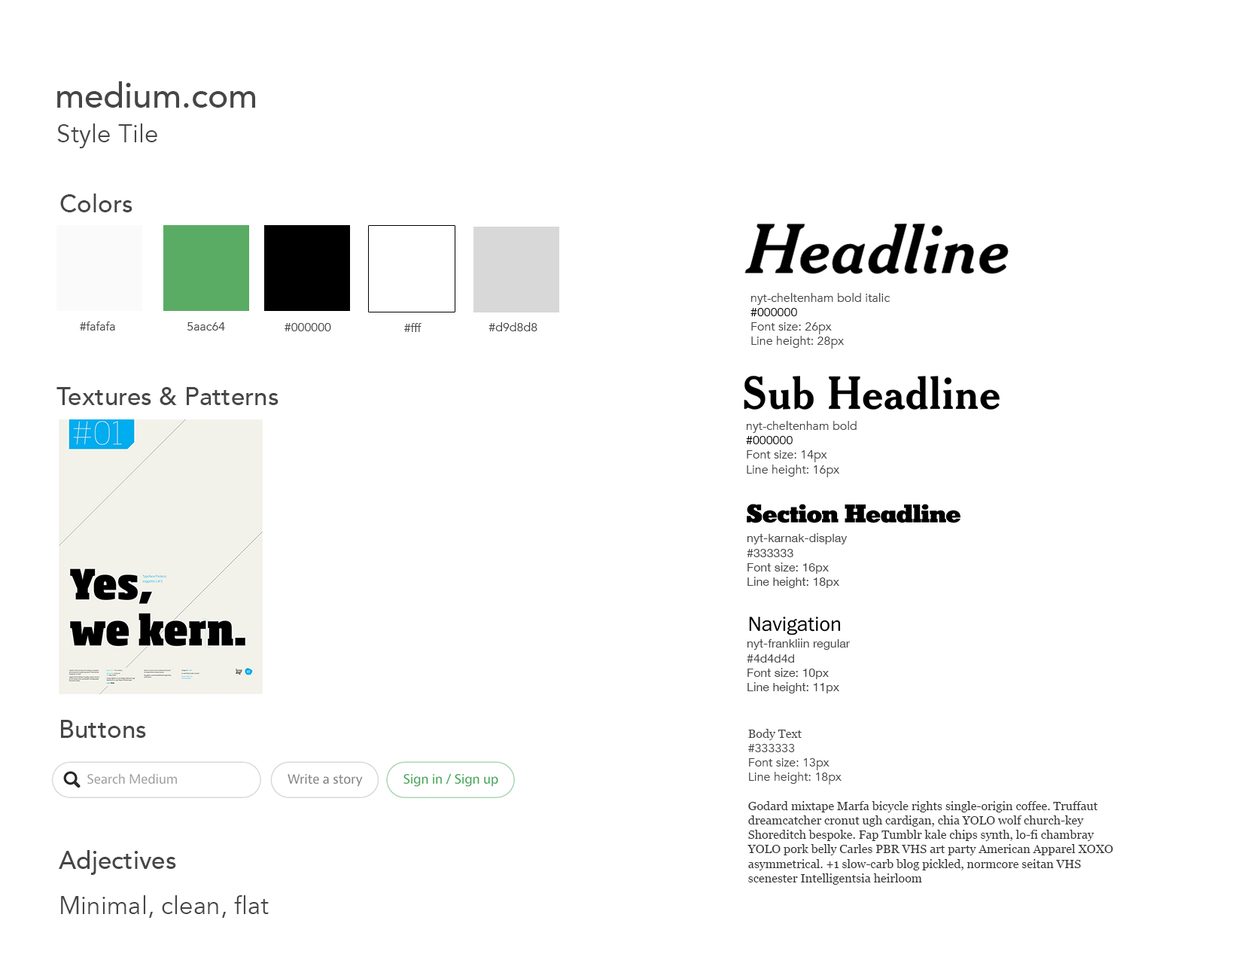
<style>
.page{position:relative;width:1242px;height:960px;background:#ffffff}
.page>*{position:absolute;margin:0}
.t1{font:34.5px "Avenir-Medium";color:#464646}
.t2{font:25.1px "Avenir-Book";color:#464646}
.t3{font:25.1px "Avenir-Medium";color:#464646}
.t4{font:12px "Avenir-Book";color:#464646}
.t5{font:12px "Avenir-Book";color:#000000}
.t6{font:12px "HelveticaNeue";color:#464646}
.t7{font:12px "Georgia";color:#333333}
.t8{font:12px "Georgia";color:#464646}
</style>
<div class="page">
<p class="t1" style="left:57px;top:81px;width:198px;height:27px">medium.com</p>
<p class="t2" style="left:57px;top:123px;width:100px;height:25px">Style Tile</p>
<p class="t3" style="left:60px;top:193px;width:73px;height:19px">Colors</p>
<p class="t4" style="left:751px;top:293px;width:140px;height:56px">nyt-cheltenham bold italic<br><span class="t5">#000000<br></span>Font size: 26px<br>Line height: 28px</p>
<p class="t4" style="left:80px;top:321px;width:35px;height:10px">#fafafa</p>
<p class="t4" style="left:187px;top:322px;width:38px;height:9px">5aac64</p>
<p class="t4" style="left:285px;top:323px;width:46px;height:8px">#000000</p>
<p class="t4" style="left:404px;top:323px;width:18px;height:9px">#fff</p>
<p class="t4" style="left:489px;top:322px;width:49px;height:9px">#d9d8d8</p>
<p class="t3" style="left:56px;top:387px;width:223px;height:18px">Textures &amp; Patterns</p>
<p class="t4" style="left:746px;top:421px;width:111px;height:56px">nyt-cheltenham bold<br><span class="t5">#000000<br></span>Font size: 14px<br>Line height: 16px</p>
<p class="t6" style="left:747px;top:533px;width:101px;height:55px">nyt-karnak-display<br>#333333<br>Font size: 16px<br>Line height: 18px</p>
<p class="t6" style="left:747px;top:638px;width:104px;height:55px">nyt-frankliin regular<br>#4d4d4d<br>Font size: 10px<br>Line height: 11px</p>
<p class="t3" style="left:61px;top:720px;width:85px;height:18px">Buttons</p>
<p class="t7" style="left:748px;top:729px;width:365px;height:156px"><span class="t8">Body Text<br></span><span class="t4">#333333<br>Font size: 13px<br>Line height: 18px<br><br></span>Godard mixtape Marfa bicycle rights single-origin coffee. Truffaut dreamcatcher cronut ugh cardigan, chia YOLO wolf church-key Shoreditch bespoke. Fap Tumblr kale chips synth, lo-fi chambray <br>YOLO pork belly Carles PBR VHS art party American Apparel XOXO asymmetrical. +1 slow-carb blog pickled, normcore seitan VHS <br>scenester Intelligentsia heirloom</p>
<p class="t3" style="left:59px;top:850px;width:117px;height:25px">Adjectives</p>
<p class="t2" style="left:61px;top:895px;width:208px;height:23px">Minimal, clean, flat</p>
</div>
